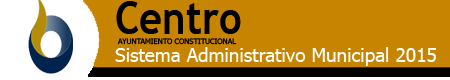
<style>
.page{position:relative;width:450px;height:80px;background:#c68400}
.page>*{position:absolute;margin:0}
.t1{font:45.8px "TrebuchetMS-Bold";color:#000000;scale:0.87 1}
.t2{font:7.5px "Tahoma";color:#000000}
.t3{font:19px "Tahoma";color:#ffffff}
</style>
<div class="page">
<p class="t1" style="left:116px;top:1px;width:125px;height:33px">Centro</p>
<p class="t2" style="left:117px;top:38px;width:120px;height:7px">AYUNTAMIENTO CONSTITUCIONAL</p>
<p class="t3" style="left:115px;top:47px;width:321px;height:19px">Sistema Administrativo Municipal 2015</p>
</div>
